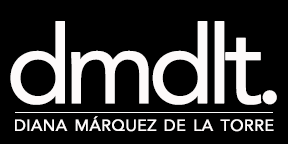
<style>
.page{position:relative;width:288px;height:144px;background:#000000}
.page>*{position:absolute;margin:0}
.t1{font:108px "Avenir-Roman";letter-spacing:-0.1em;color:#fdfafa;font-weight:bold}
.t2{font:23px "Avenir-Roman";color:#fdfafa;font-variant:small-caps;font-weight:bold}
</style>
<div class="page">
<p class="t1" style="left:10px;top:21px;width:267px;height:84px">dmdlt.</p>
<p class="t2" style="left:15px;top:116px;width:259px;height:16px">diana márquez de la torre</p>
</div>
